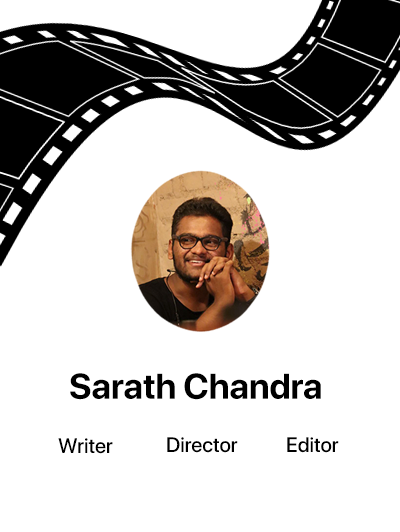
<style>
.page{position:relative;width:400px;height:532px;background:#ffffff}
.page>*{position:absolute;margin:0}
.t1{font:35.6px "SFProDisplay-Bold";color:#000000}
.t2{font:20.8px "SFProDisplay-Medium";color:#000000}
</style>
<div class="page">
<p class="t1" style="left:70px;top:373px;width:251px;height:27px">Sarath Chandra</p>
<p class="t2" style="left:58px;top:438px;width:55px;height:16px">Writer</p>
<p class="t2" style="left:167px;top:437px;width:71px;height:16px">Director</p>
<p class="t2" style="left:287px;top:437px;width:52px;height:16px">Editor</p>
</div>
